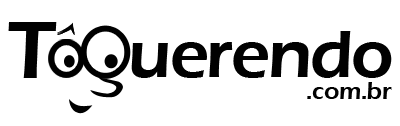
<style>
.page{position:relative;width:400px;height:126px;background:#ffffff}
.page>*{position:absolute;margin:0}
.t1{font:83.8px "ErasITC-Demi";color:#010101}
.t2{font:42.3px "EdwardianScriptITC";color:#010101}
.t3{font:68.5px "ErasITC-Demi";letter-spacing:-0.025em;color:#010101}
.t4{font:25.3px "ErasITC-Demi";letter-spacing:-0.025em;color:#010101}
</style>
<div class="page">
<p class="t1" style="left:8px;top:22px;width:49px;height:56px">T</p>
<p class="t2" style="left:57px;top:22px;width:18px;height:11px">^</p>
<p class="t2" style="left:57px;top:23px;width:18px;height:11px">^</p>
<p class="t2" style="left:57px;top:24px;width:18px;height:11px">^</p>
<p class="t2" style="left:57px;top:24px;width:18px;height:11px">^</p>
<p class="t3" style="left:131px;top:31px;width:261px;height:47px">uerendo</p>
<p class="t4" style="left:307px;top:82px;width:85px;height:17px">.com.br</p>
</div>
